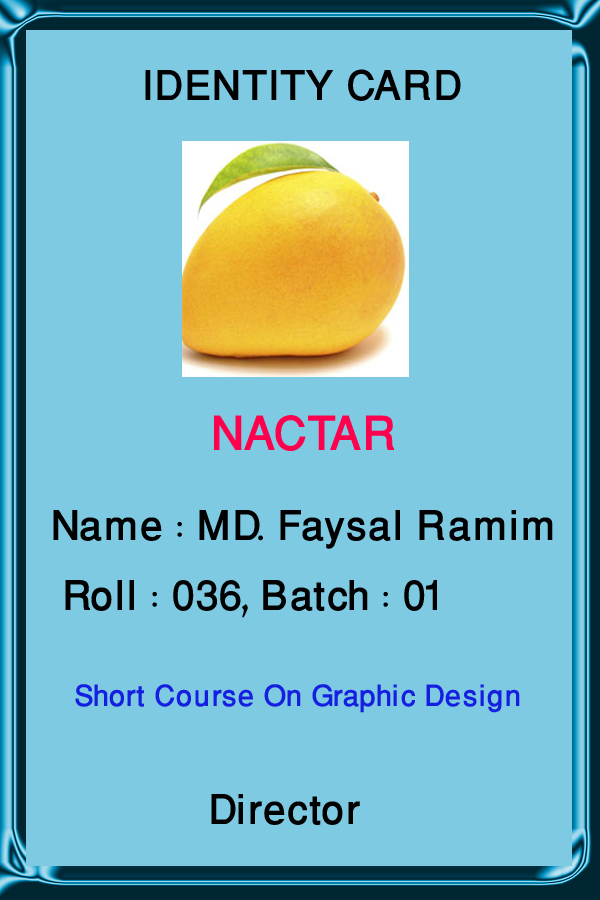
<style>
.page{position:relative;width:600px;height:900px;background:#7fcae3}
.page>*{position:absolute;margin:0}
.t1{font:58.3px "WinSoftPro-Medium";color:#000000}
.t2{font:66.7px "WinSoftPro-Medium";color:#ff004e}
.t3{font:41.7px "WinSoftPro-Medium";color:#151fe0}
</style>
<div class="page">
<p class="t1" style="left:145px;top:69px;width:316px;height:32px">IDENTITY CARD</p>
<p class="t2" style="left:214px;top:415px;width:180px;height:36px">NACTAR</p>
<p class="t1" style="left:53px;top:510px;width:500px;height:39px">Name : MD. Faysal Ramim</p>
<p class="t1" style="left:65px;top:580px;width:372px;height:38px">Roll : 036, Batch : 01</p>
<p class="t3" style="left:75px;top:684px;width:445px;height:29px">Short Course On Graphic Design</p>
<p class="t1" style="left:211px;top:794px;width:149px;height:31px">Director</p>
</div>
